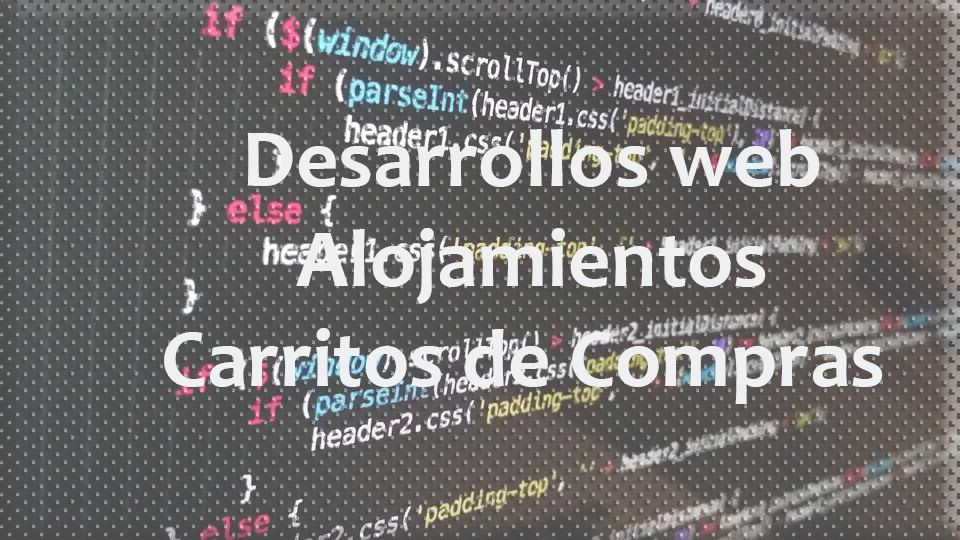
<style>
.page{position:relative;width:960px;height:540px}
.page>*{position:absolute;margin:0}
.t1{font:83.3px "Candara-Bold";color:#eef0f1}
</style>
<div class="page">
<p class="t1" style="left:164px;top:129px;width:719px;height:275px;text-align:center">Desarrollos web<br>Alojamientos<br>Carritos de Compras</p>
</div>
